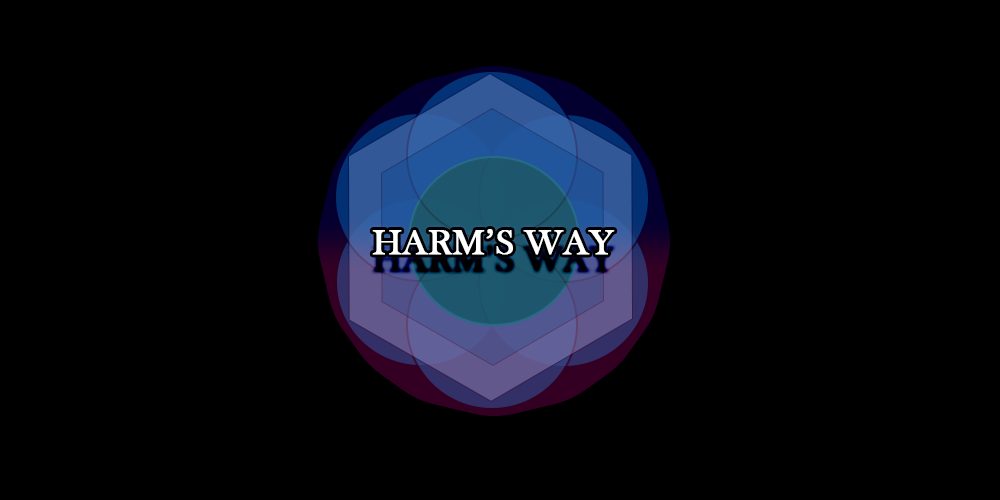
<style>
.page{position:relative;width:1000px;height:500px;background:#000000}
.page>*{position:absolute;margin:0}
.t1{font:36px "BaskOldFace";color:#ffffff;font-weight:bold}
</style>
<div class="page">
<p class="t1" style="left:372px;top:229px;width:243px;height:26px">HARM’S WAY</p>
</div>
